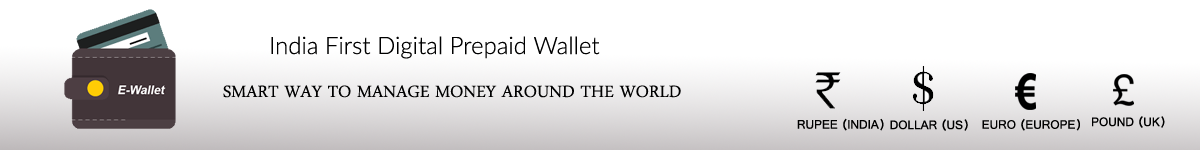
<style>
.page{position:relative;width:1200px;height:150px;background:#ffffff}
.page>*{position:absolute;margin:0}
.t1{font:24px "Lato-Light";color:#000000}
.t2{font:24px "DaunPenh";color:#000000}
.t3{font:12.8px "Gautami";color:#000000}
</style>
<div class="page">
<p class="t1" style="left:271px;top:36px;width:329px;height:23px">India First Digital Prepaid Wallet</p>
<p class="t2" style="left:223px;top:85px;width:458px;height:13px">SMART WAY TO MANAGE MONEY AROUND THE WORLD</p>
<p class="t3" style="left:797px;top:118px;width:87px;height:13px">RUPEE (INDIA)</p>
<p class="t3" style="left:890px;top:119px;width:78px;height:12px">DOLLAR (US)</p>
<p class="t3" style="left:982px;top:118px;width:98px;height:13px">EURO (EUROPE)</p>
<p class="t3" style="left:1092px;top:116px;width:73px;height:12px">POUND (UK)</p>
</div>
